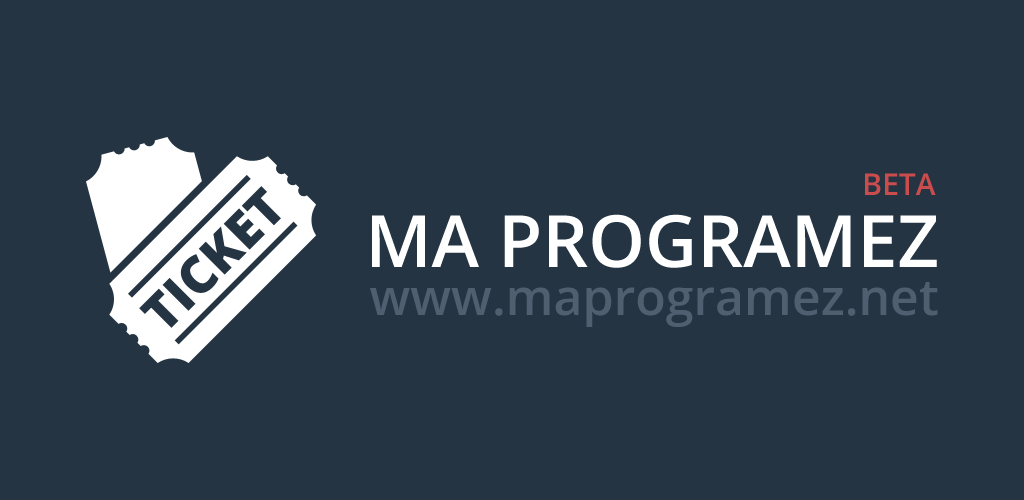
<style>
.page{position:relative;width:1024px;height:500px;background:#253443}
.page>*{position:absolute;margin:0}
.t1{font:30px "OpenSans-Semibold";color:#ca4d4d;text-transform:uppercase}
.t2{font:72px "OpenSans-Semibold";color:#ffffff;text-transform:uppercase}
.t3{font:50px "OpenSans-Semibold";color:#4f5f70}
</style>
<div class="page">
<p class="t1" style="left:865px;top:173px;width:71px;height:22px">beta</p>
<p class="t2" style="left:372px;top:214px;width:565px;height:54px">Ma Programez</p>
<p class="t3" style="left:370px;top:282px;width:568px;height:45px">www.maprogramez.net</p>
</div>
